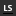
<style>
.page{position:relative;width:16px;height:16px;background:#303030}
.page>*{position:absolute;margin:0}
.t1{font:8.2px "MyriadPro-Regular";color:#ffffff}
</style>
<div class="page">
<p class="t1" style="left:4px;top:5px;width:8px;height:6px">LS</p>
</div>
